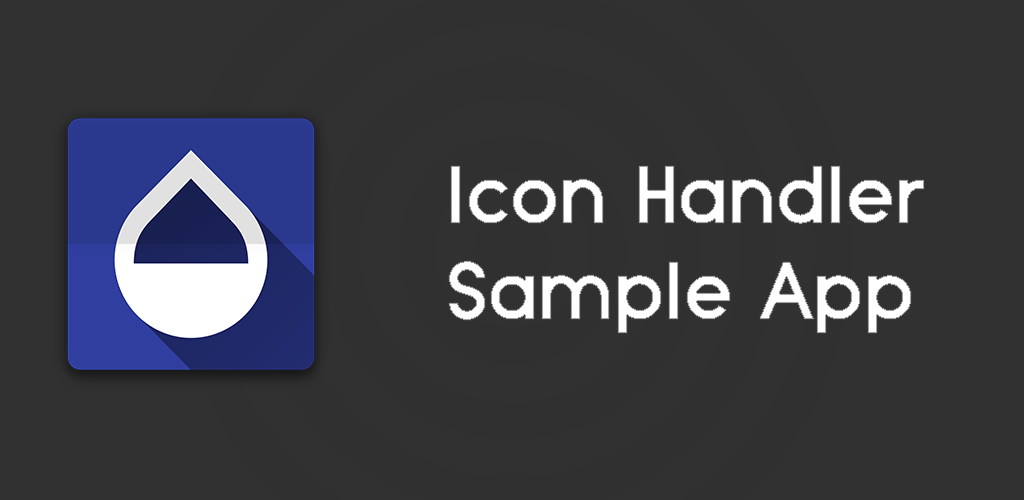
<style>
.page{position:relative;width:1024px;height:500px;background:#313131}
.page>*{position:absolute;margin:0}
.t1{font:80px "TypoGrotesk-Bold";color:#ffffff}
</style>
<div class="page">
<p class="t1" style="left:449px;top:166px;width:475px;height:167px">Icon Handler <br>Sample App</p>
</div>
